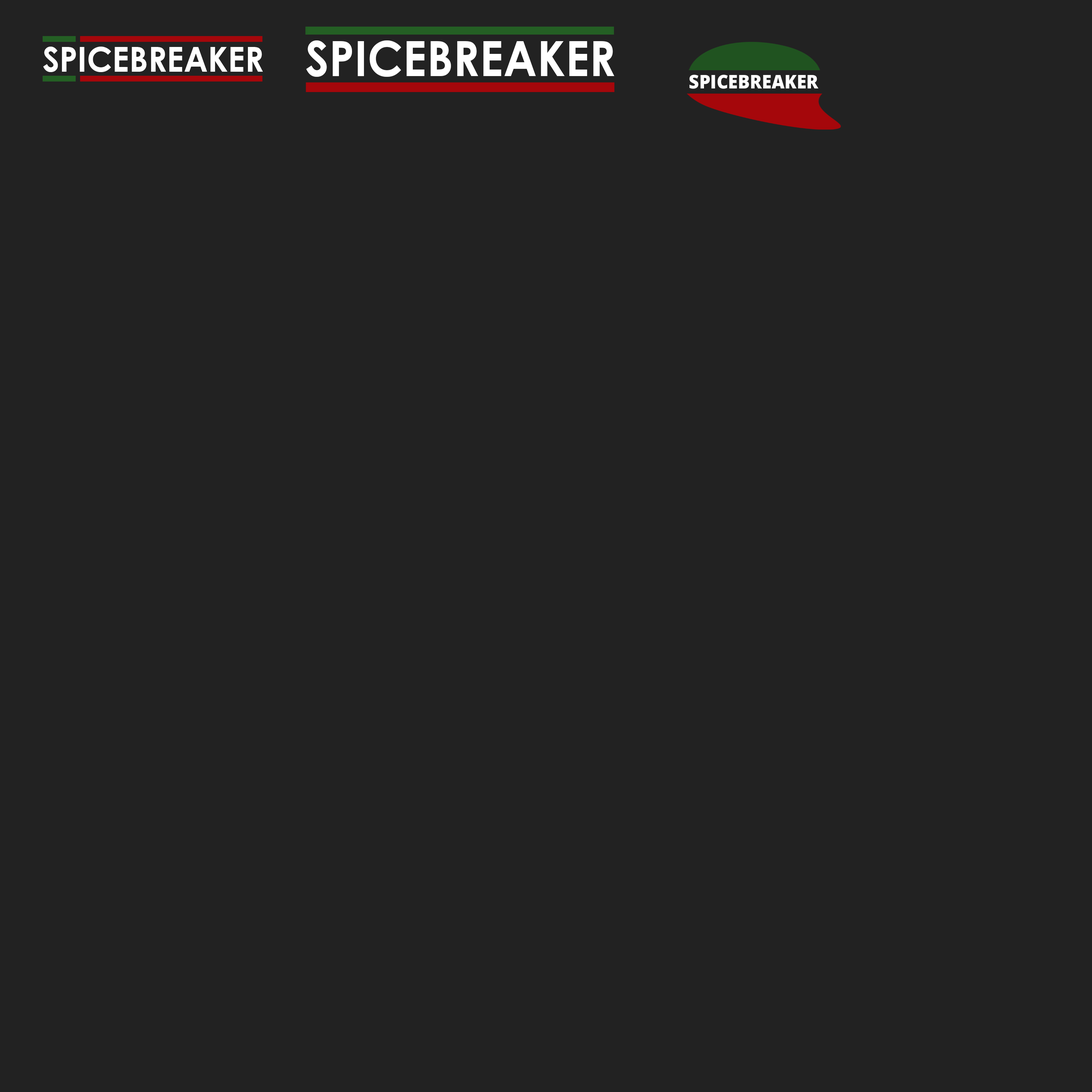
<style>
.page{position:relative;width:1092px;height:1092px;background:#222222}
.page>*{position:absolute;margin:0}
.t1{font:48.5px "CenturyGothic-Bold";letter-spacing:0.005em;color:#ffffff;scale:0.93 1}
.t2{font:34.5px "CenturyGothic-Bold";letter-spacing:0.005em;color:#ffffff;scale:0.93 1}
.t3{font:18.9px "OpenSans-Extrabold";letter-spacing:0.005em;color:#ffffff;scale:0.93 1}
</style>
<div class="page">
<p class="t1" style="left:306px;top:40px;width:308px;height:37px">SPICEBREAKER</p>
<p class="t2" style="left:43px;top:47px;width:220px;height:25px">SPICEBREAKER</p>
<p class="t3" style="left:689px;top:75px;width:130px;height:14px">SPICEBREAKER</p>
</div>
